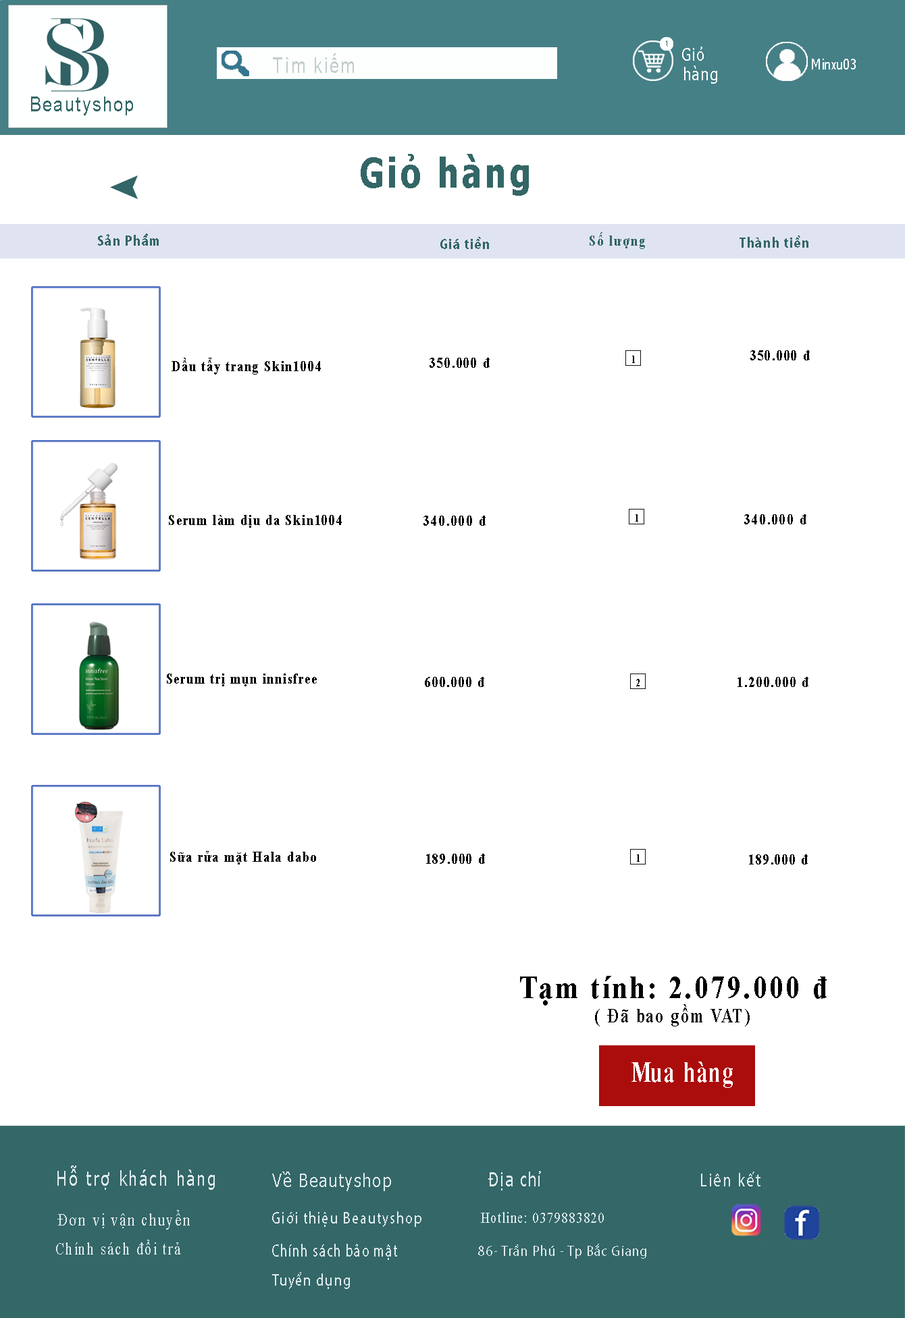
<style>
.page{position:relative;width:905px;height:1318px;background:#ffffff}
.page>*{position:absolute;margin:0}
.t1{font:8.4px "Tahoma";letter-spacing:0.1em;color:#336666;scale:0.83 1}
.t2{font:21.4px "ArialMT";letter-spacing:0.1em;color:#c1cdcd;scale:0.8 1}
.t3{font:17.8px "Tahoma";letter-spacing:0.1em;color:#ffffff;scale:0.81 1}
.t4{font:17.3px "Tahoma";letter-spacing:0.1em;color:#ffffff;scale:0.81 1}
.t5{font:14px "Tahoma";color:#ffffff;scale:0.81 1}
.t6{font:20.9px "ArialMT";letter-spacing:0.1em;color:#336666;scale:0.81 1}
.t7{font:41.1px "Tahoma-Bold";letter-spacing:0.1em;color:#336666;scale:0.81 1}
.t8{font:14.9px "MyriadPro-Bold";letter-spacing:0.1em;color:#336666;scale:0.8 1}
.t9{font:14.9px "TimesNewRomanPS-BoldMT";letter-spacing:0.1em;color:#336666;scale:0.8 1}
.t10{font:14.9px "TimesNewRomanPS-BoldMT";letter-spacing:0.1em;color:#000000;scale:0.8 1}
.t11{font:10.5px "TimesNewRomanPS-BoldMT";letter-spacing:0.1em;color:#000000;scale:0.8 1}
.t12{font:33.3px "TimesNewRomanPS-BoldMT";letter-spacing:0.1em;color:#000000;scale:0.8 1}
.t13{font:19.9px "TimesNewRomanPS-BoldMT";letter-spacing:0.1em;color:#000000;scale:0.8 1}
.t14{font:28.7px "TimesNewRomanPS-BoldMT";letter-spacing:0.1em;color:#ffffff;scale:0.76 1}
.t15{font:20px "Tahoma";letter-spacing:0.1em;color:#dfebee;scale:0.8 1}
.t16{font:18.9px "Tahoma";letter-spacing:0.1em;color:#dfebee;scale:0.8 1}
.t17{font:19.9px "Tahoma";letter-spacing:0.1em;color:#dfebee;scale:0.73 1}
.t18{font:18.7px "MyriadPro-Regular";letter-spacing:0.1em;color:#dfebee;scale:0.81 1}
.t19{font:17.6px "TimesNewRomanPSMT";letter-spacing:0.1em;color:#dfebee;scale:0.8 1}
.t20{font:16.5px "MyriadPro-Regular";letter-spacing:0.1em;color:#dfebee;scale:0.8 1}
.t21{font:15px "TimesNewRomanPSMT";letter-spacing:0.1em;color:#dfebee;scale:0.8 1}
.t22{font:17.2px "TimesNewRomanPSMT";letter-spacing:0.1em;color:#dfebee;scale:0.8 1}
.t23{font:17.8px "MyriadPro-Regular";letter-spacing:0.1em;color:#dfebee;scale:0.7 1}
.t24{font:15px "MyriadPro-Regular";letter-spacing:0.1em;color:#dfebee;scale:0.8 1}
.t25{font:16.6px "MyriadPro-Regular";letter-spacing:0.1em;color:#dfebee;scale:0.8 1}
</style>
<div class="page">
<p class="t1" style="left:666px;top:41px;width:2px;height:6px">1</p>
<p class="t2" style="left:273px;top:53px;width:81px;height:20px">Tìm kiếm</p>
<p class="t3" style="left:682px;top:47px;width:21px;height:14px">Giỏ</p>
<p class="t4" style="left:684px;top:65px;width:33px;height:19px">hàng</p>
<p class="t5" style="left:811px;top:59px;width:44px;height:11px">Minxu03</p>
<p class="t6" style="left:31px;top:97px;width:102px;height:18px">Beautyshop</p>
<p class="t7" style="left:360px;top:154px;width:169px;height:42px">Giỏ hàng</p>
<p class="t8" style="left:98px;top:234px;width:61px;height:12px">Sản Phẩm</p>
<p class="t9" style="left:589px;top:232px;width:56px;height:17px">Số lượng</p>
<p class="t8" style="left:440px;top:237px;width:49px;height:12px">Giá tiền</p>
<p class="t8" style="left:739px;top:236px;width:69px;height:12px">Thành tiền</p>
<p class="t10" style="left:750px;top:350px;width:59px;height:10px">350.000 đ</p>
<p class="t10" style="left:171px;top:358px;width:150px;height:17px">Dầu tẩy trang Skin1004</p>
<p class="t10" style="left:429px;top:358px;width:60px;height:10px">350.000 đ</p>
<p class="t11" style="left:632px;top:356px;width:3px;height:7px">1</p>
<p class="t10" style="left:169px;top:515px;width:173px;height:13px">Serum làm dịu da Skin1004</p>
<p class="t10" style="left:423px;top:516px;width:62px;height:10px">340.000 đ</p>
<p class="t11" style="left:635px;top:514px;width:3px;height:8px">1</p>
<p class="t10" style="left:744px;top:514px;width:62px;height:10px">340.000 đ</p>
<p class="t10" style="left:167px;top:674px;width:150px;height:12px">Serum trị mụn innisfree</p>
<p class="t10" style="left:425px;top:677px;width:59px;height:10px">600.000 đ</p>
<p class="t10" style="left:737px;top:677px;width:71px;height:10px">1.200.000 đ</p>
<p class="t11" style="left:636px;top:679px;width:3px;height:7px">2</p>
<p class="t10" style="left:170px;top:851px;width:146px;height:14px">Sữa rửa mặt Hala dabo</p>
<p class="t10" style="left:426px;top:854px;width:59px;height:10px">189.000 đ</p>
<p class="t11" style="left:637px;top:855px;width:2px;height:7px">1</p>
<p class="t10" style="left:749px;top:855px;width:58px;height:10px">189.000 đ</p>
<p class="t12" style="left:520px;top:976px;width:306px;height:30px">Tạm tính: 2.079.000 đ</p>
<p class="t13" style="left:595px;top:1004px;width:154px;height:23px">( Đã bao gồm VAT)</p>
<p class="t14" style="left:631px;top:1062px;width:101px;height:26px">Mua hàng</p>
<p class="t15" style="left:57px;top:1166px;width:158px;height:24px">Hỗ trợ khách hàng</p>
<p class="t16" style="left:272px;top:1172px;width:119px;height:19px">Về Beautyshop</p>
<p class="t17" style="left:488px;top:1171px;width:53px;height:20px">Địa chỉ</p>
<p class="t18" style="left:701px;top:1172px;width:59px;height:15px">Liên kết</p>
<p class="t19" style="left:57px;top:1210px;width:133px;height:20px">Đơn vị vận chuyển</p>
<p class="t20" style="left:272px;top:1212px;width:149px;height:15px">Giới thiệu Beautyshop</p>
<p class="t21" style="left:481px;top:1212px;width:122px;height:11px">Hotline: 0379883820</p>
<p class="t22" style="left:56px;top:1240px;width:125px;height:15px">Chính sách đổi trả</p>
<p class="t23" style="left:272px;top:1244px;width:125px;height:16px">Chính sách bảo mật</p>
<p class="t24" style="left:478px;top:1244px;width:168px;height:15px">86- Trần Phú - Tp Bắc Giang</p>
<p class="t25" style="left:272px;top:1272px;width:78px;height:17px">Tuyển dụng</p>
</div>
